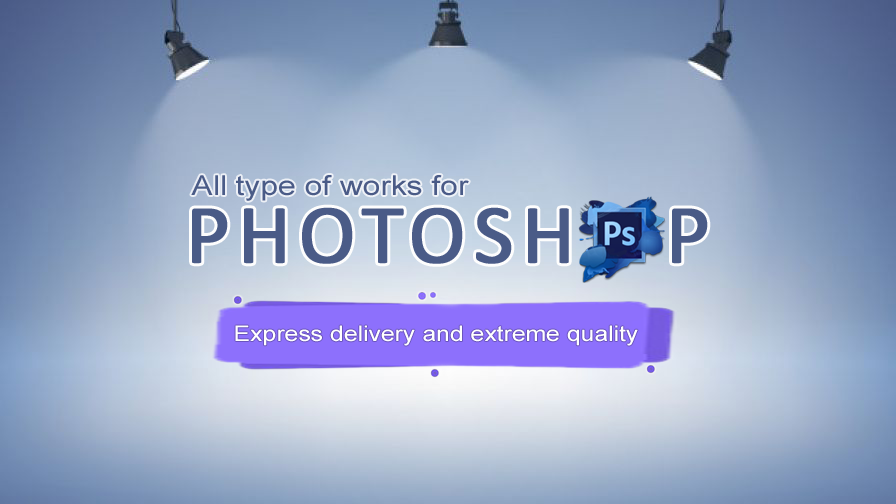
<style>
.page{position:relative;width:896px;height:504px}
.page>*{position:absolute;margin:0}
.t1{font:27.4px "ArialMT";color:#4a5b87;scale:1.16 1}
.t2{font:84.6px "Calibri";letter-spacing:0.075em;color:#4a5b87;font-weight:bold}
.t3{font:21.4px "ArialMT";color:#ffffff;scale:1.16 1}
</style>
<div class="page">
<p class="t1" style="left:191px;top:175px;width:278px;height:26px">All type of works for</p>
<p class="t2" style="left:192px;top:207px;width:516px;height:57px">PHOTOSH   P</p>
<p class="t3" style="left:235px;top:325px;width:403px;height:21px">Express delivery and extreme quality</p>
</div>
